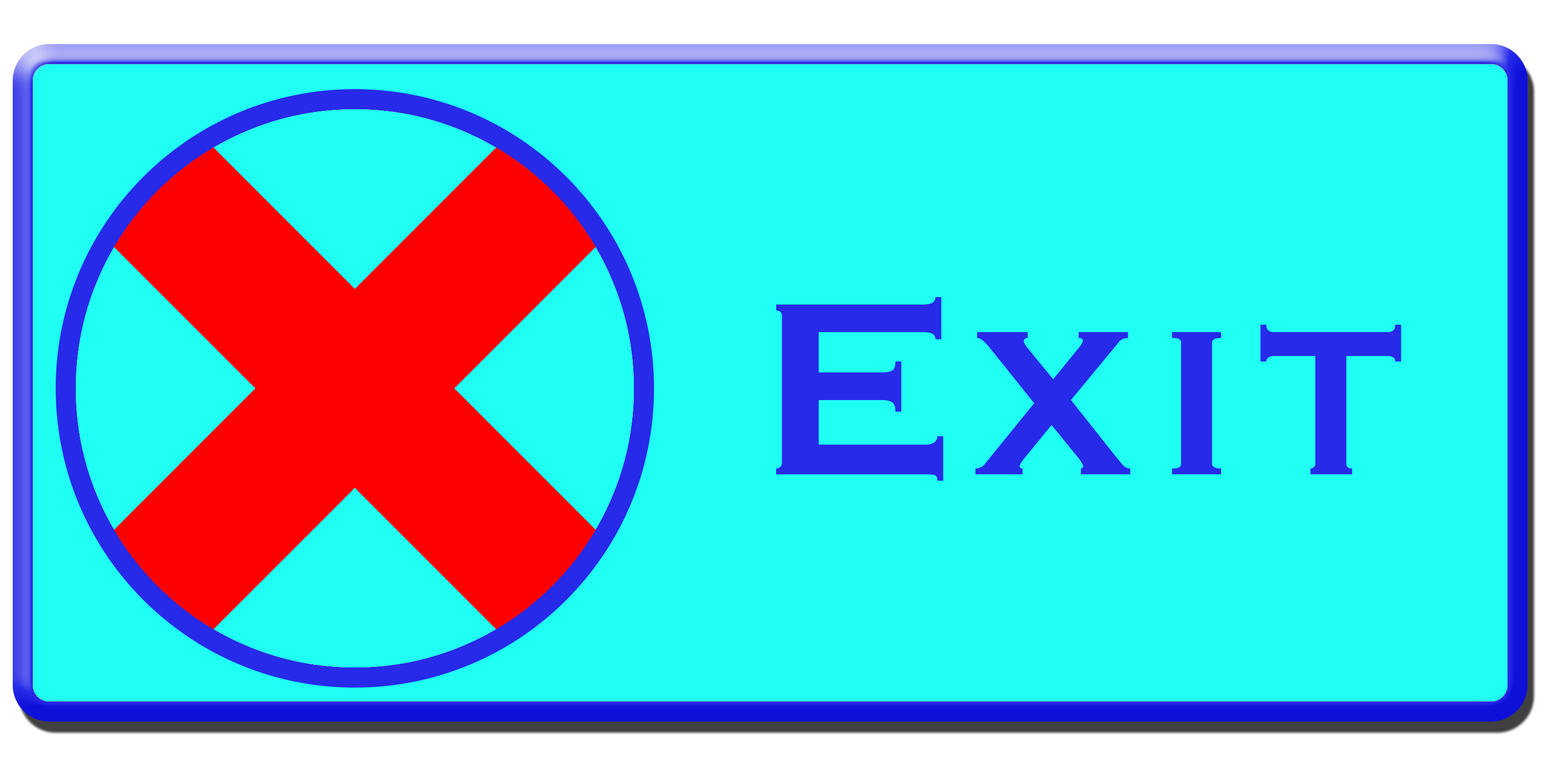
<style>
.page{position:relative;width:1561px;height:764px;background:#1ffff3}
.page>*{position:absolute;margin:0}
.t1{font:322.7px "Copperplate";color:#272ae8}
</style>
<div class="page">
<p class="t1" style="left:776px;top:297px;width:625px;height:184px">Exit</p>
</div>
